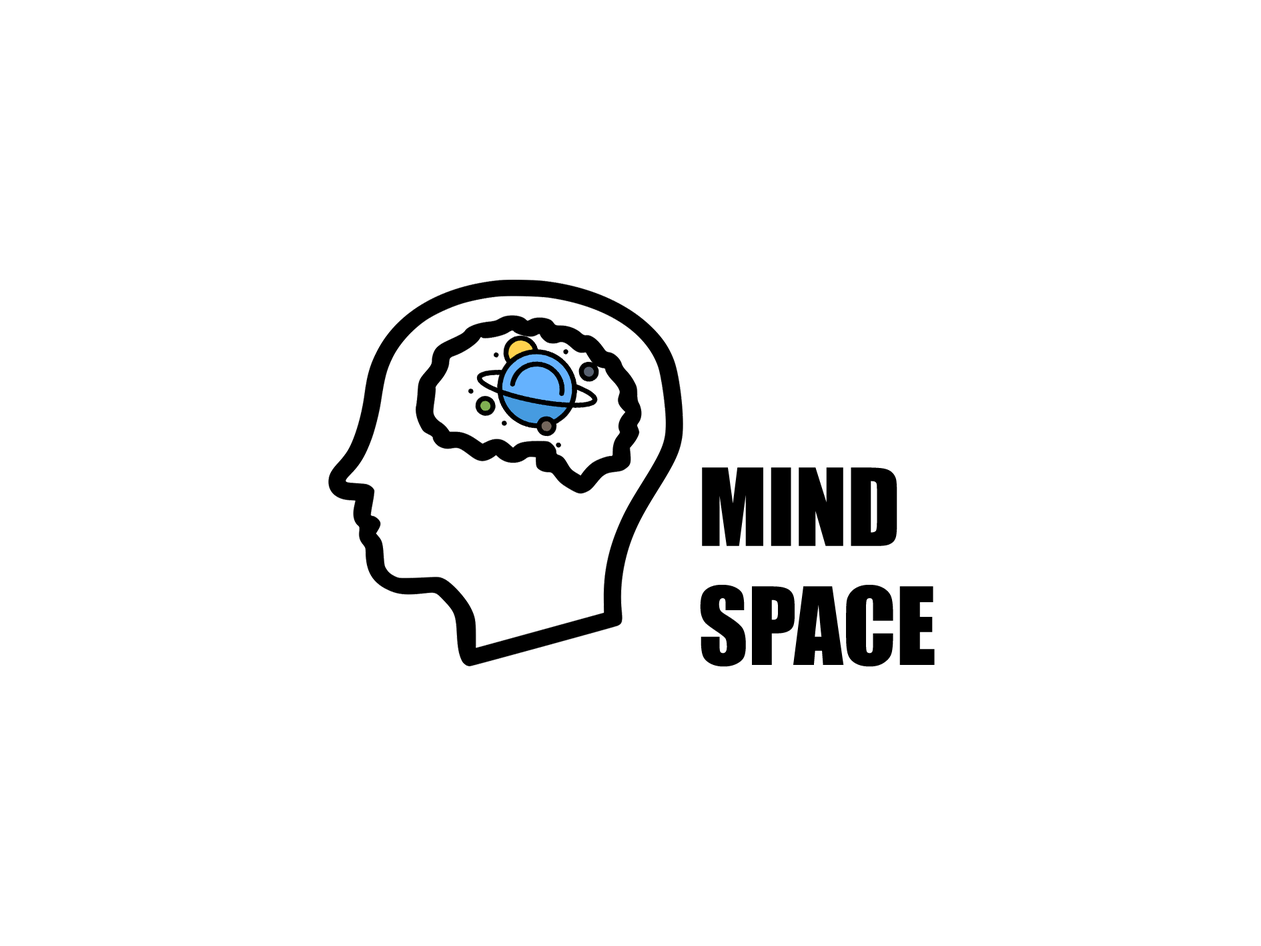
<style>
.page{position:relative;width:1261px;height:946px;background:#ffffff}
.page>*{position:absolute;margin:0}
.t1{font:99px "Impact";color:#000000}
</style>
<div class="page">
<p class="t1" style="left:700px;top:467px;width:235px;height:200px">MIND<br>SPACE</p>
</div>
